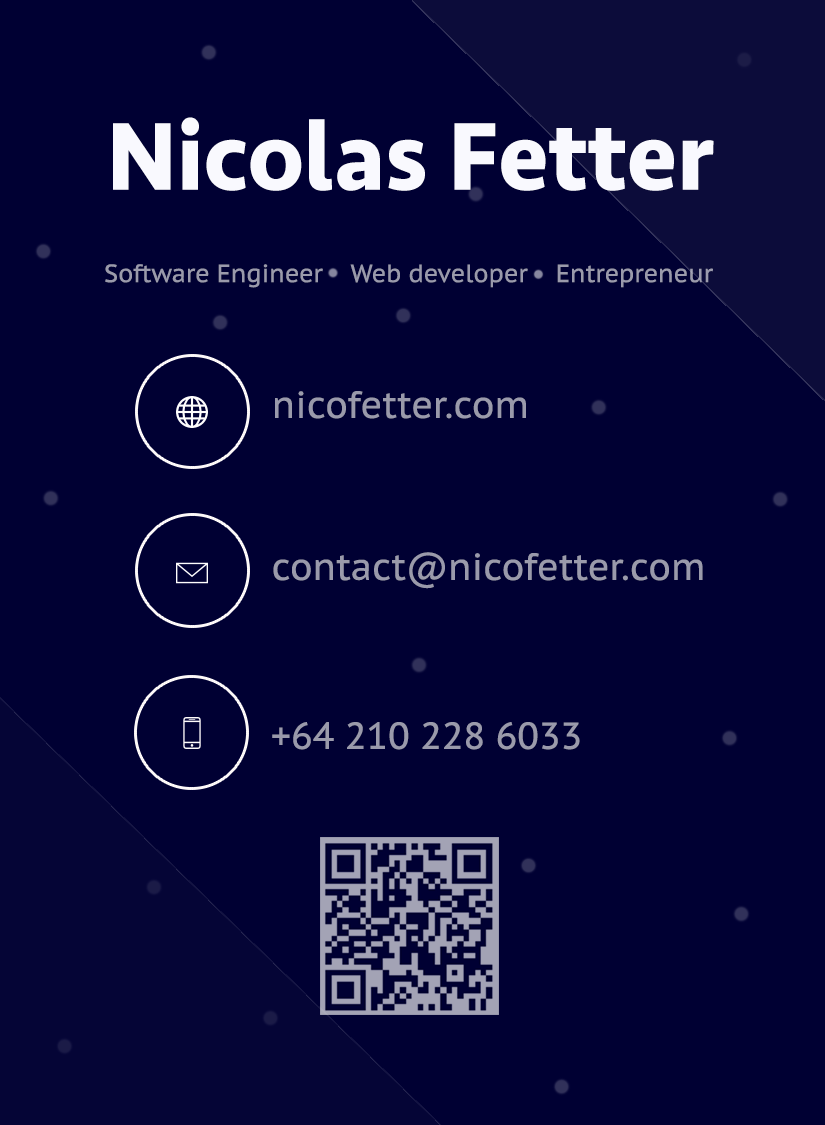
<style>
.page{position:relative;width:825px;height:1125px;background:#000033}
.page>*{position:absolute;margin:0}
.t1{font:100px "Seravek-Bold";color:#f9f9fe;scale:0.97 1}
.t2{font:25px "PTSans-Caption";color:#9a9aab;scale:0.97 1}
.t3{font:37.5px "PTSans-Caption";color:#9a9aab;scale:0.97 1}
</style>
<div class="page">
<p class="t1" style="left:113px;top:117px;width:601px;height:74px">Nicolas Fetter</p>
<p class="t2" style="left:105px;top:264px;width:608px;height:24px">Software Engineer    Web developer    Entrepreneur</p>
<p class="t3" style="left:275px;top:391px;width:251px;height:28px">nicofetter.com</p>
<p class="t3" style="left:273px;top:552px;width:430px;height:37px">contact@nicofetter.com</p>
<p class="t3" style="left:272px;top:722px;width:308px;height:28px">+64 210 228 6033</p>
</div>
